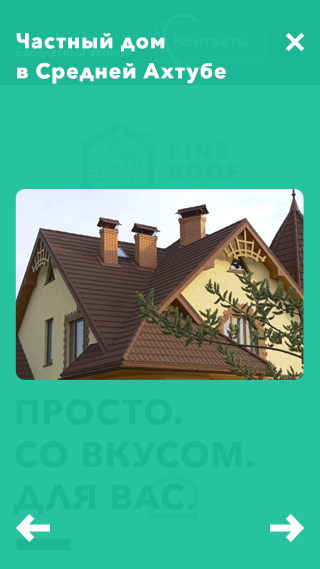
<style>
.page{position:relative;width:320px;height:569px;background:#27c3a0}
.page>*{position:absolute;margin:0}
.t1{font:21px/30px "AvenirNext-Bold";letter-spacing:0.05em;color:#ffffff}
.t2{font:15px "AvenirNext-Bold";letter-spacing:0.025em;color:#1fc09b}
.t3{font:35px/42.5px "AvenirNext-Bold";letter-spacing:0.05em;color:#1cb895;text-transform:uppercase}
</style>
<div class="page">
<p class="t1" style="left:16px;top:33px;width:210px;height:51px">Частный дом <br>в Средней Ахтубе</p>
<p class="t2" style="left:174px;top:35px;width:75px;height:12px">Контакты</p>
<p class="t3" style="left:13px;top:398px;width:241px;height:117px">Просто.<br>Со вкусом.<br>Для вас.</p>
</div>
